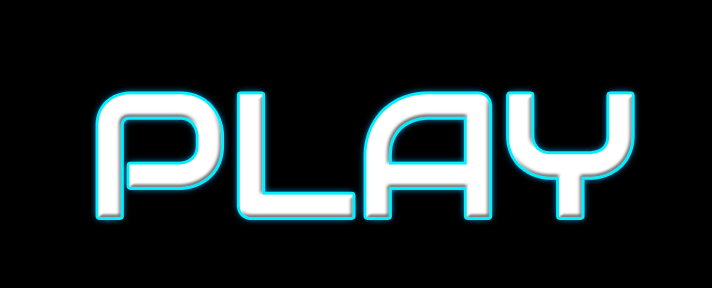
<style>
.page{position:relative;width:712px;height:288px;background:#000000}
.page>*{position:absolute;margin:0}
.t1{font:80.9px "Audiowide-Regular";color:#ffffff}
</style>
<div class="page">
<p class="t1" style="left:98px;top:94px;width:534px;height:123px">PLAY</p>
</div>
